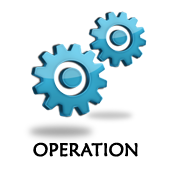
<style>
.page{position:relative;width:170px;height:170px;background:#ffffff}
.page>*{position:absolute;margin:0}
.t1{font:18px "MaiandraGD-Regular";color:#000000;font-weight:bold}
</style>
<div class="page">
<p class="t1" style="left:33px;top:142px;width:105px;height:15px">OPERATION</p>
</div>
